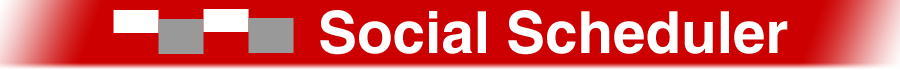
<style>
.page{position:relative;width:900px;height:70px;background:#cc0000}
.page>*{position:absolute;margin:0}
.t1{font:58.3px "Helvetica-Bold";color:#ffffff}
</style>
<div class="page">
<p class="t1" style="left:320px;top:10px;width:468px;height:45px">Social Scheduler</p>
</div>
